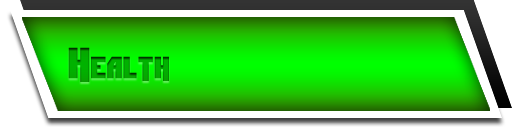
<style>
.page{position:relative;width:512px;height:128px;background:#ffffff}
.page>*{position:absolute;margin:0}
.t1{font:43.1px "Dimitri";color:#01a900;font-variant:small-caps}
</style>
<div class="page">
<p class="t1" style="left:68px;top:47px;width:101px;height:35px">Health</p>
</div>
